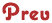
<style>
.page{position:relative;width:52px;height:23px;background:#ffffff}
.page>*{position:absolute;margin:0}
.t1{font:24px "CoquetteBold";color:#b22d2d}
</style>
<div class="page">
<p class="t1" style="left:2px;top:2px;width:48px;height:19px">Prev</p>
</div>
